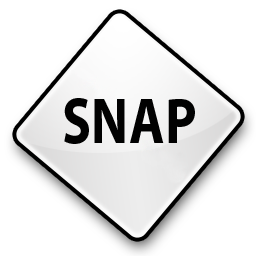
<style>
.page{position:relative;width:256px;height:256px;background:#ffffff}
.page>*{position:absolute;margin:0}
.t1{font:66px "MyriadPro-Bold";letter-spacing:0.005em;color:#010101;scale:0.82 1}
</style>
<div class="page">
<p class="t1" style="left:64px;top:98px;width:131px;height:46px">SNAP</p>
</div>
